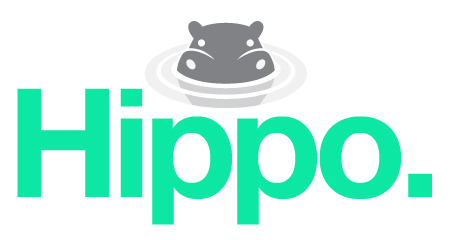
<style>
.page{position:relative;width:450px;height:240px;background:#ffffff}
.page>*{position:absolute;margin:0}
.t1{font:151.7px "HelveticaNeue-Bold";letter-spacing:-0.05em;color:#0de7a4}
</style>
<div class="page">
<p class="t1" style="left:17px;top:88px;width:415px;height:137px">Hippo.</p>
</div>
